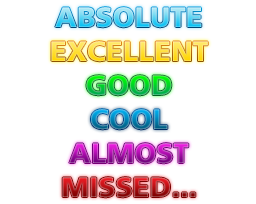
<style>
.page{position:relative;width:256px;height:204px;background:#ffffff}
.page>*{position:absolute;margin:0}
.t1{font:28px "FrutigerLTStd-Black"}
</style>
<div class="page">
<p class="t1" style="left:51px;top:41px;width:157px;height:21px">EXCELLENT</p>
<p class="t1" style="left:86px;top:75px;width:86px;height:21px">GOOD</p>
<p class="t1" style="left:91px;top:109px;width:77px;height:21px">COOL</p>
<p class="t1" style="left:69px;top:143px;width:120px;height:21px">ALMOST</p>
<p class="t1" style="left:62px;top:177px;width:134px;height:21px">MISSED...</p>
</div>
